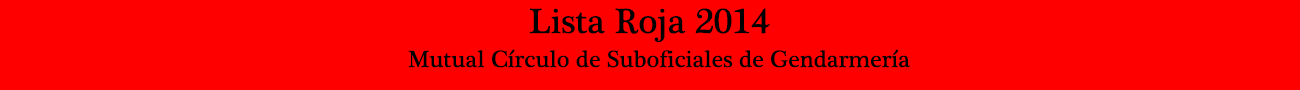
<style>
.page{position:relative;width:1300px;height:90px;background:#ff0000}
.page>*{position:absolute;margin:0}
.t1{font:36px "PlantagenetCherokee";color:#000000}
.t2{font:24px "PlantagenetCherokee";color:#000000}
</style>
<div class="page">
<p class="t1" style="left:529px;top:8px;width:241px;height:34px">Lista Roja 2014</p>
<p class="t2" style="left:408px;top:49px;width:502px;height:19px">Mutual Círculo de Suboficiales de Gendarmería</p>
</div>
